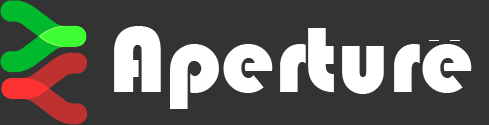
<style>
.page{position:relative;width:489px;height:125px;background:#333333}
.page>*{position:absolute;margin:0}
.t1{font:96px "Bauhaus93";color:#ffffff}
</style>
<div class="page">
<p class="t1" style="left:114px;top:26px;width:358px;height:83px">Aperture</p>
</div>
